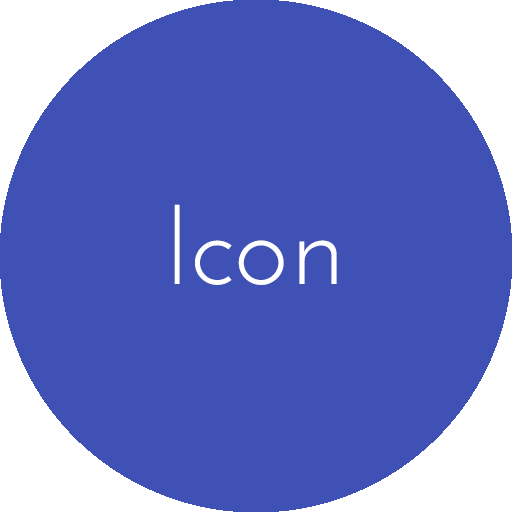
<style>
.page{position:relative;width:512px;height:512px;background:#3f51b5}
.page>*{position:absolute;margin:0}
.t1{font:113px "JosefinSans";color:#ffffff}
</style>
<div class="page">
<p class="t1" style="left:174px;top:204px;width:163px;height:81px">Icon</p>
</div>
